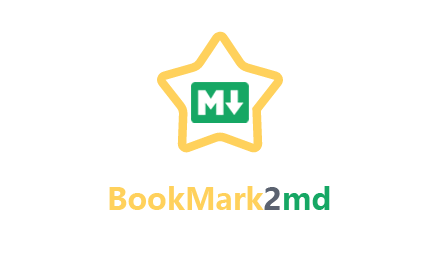
<style>
.page{position:relative;width:440px;height:280px;background:#ffffff}
.page>*{position:absolute;margin:0}
.t1{font:30px "MicrosoftYaHeiUI-Bold";color:#ffd15c}
.t2{font:30px "MicrosoftYaHeiUI-Bold";color:#5b6270}
.t3{font:30px "MicrosoftYaHeiUI-Bold";color:#16a764}
</style>
<div class="page">
<p class="t1" style="left:109px;top:186px;width:155px;height:24px">BookMark</p>
<p class="t2" style="left:264px;top:187px;width:16px;height:23px">2</p>
<p class="t3" style="left:284px;top:186px;width:46px;height:24px">md</p>
</div>
